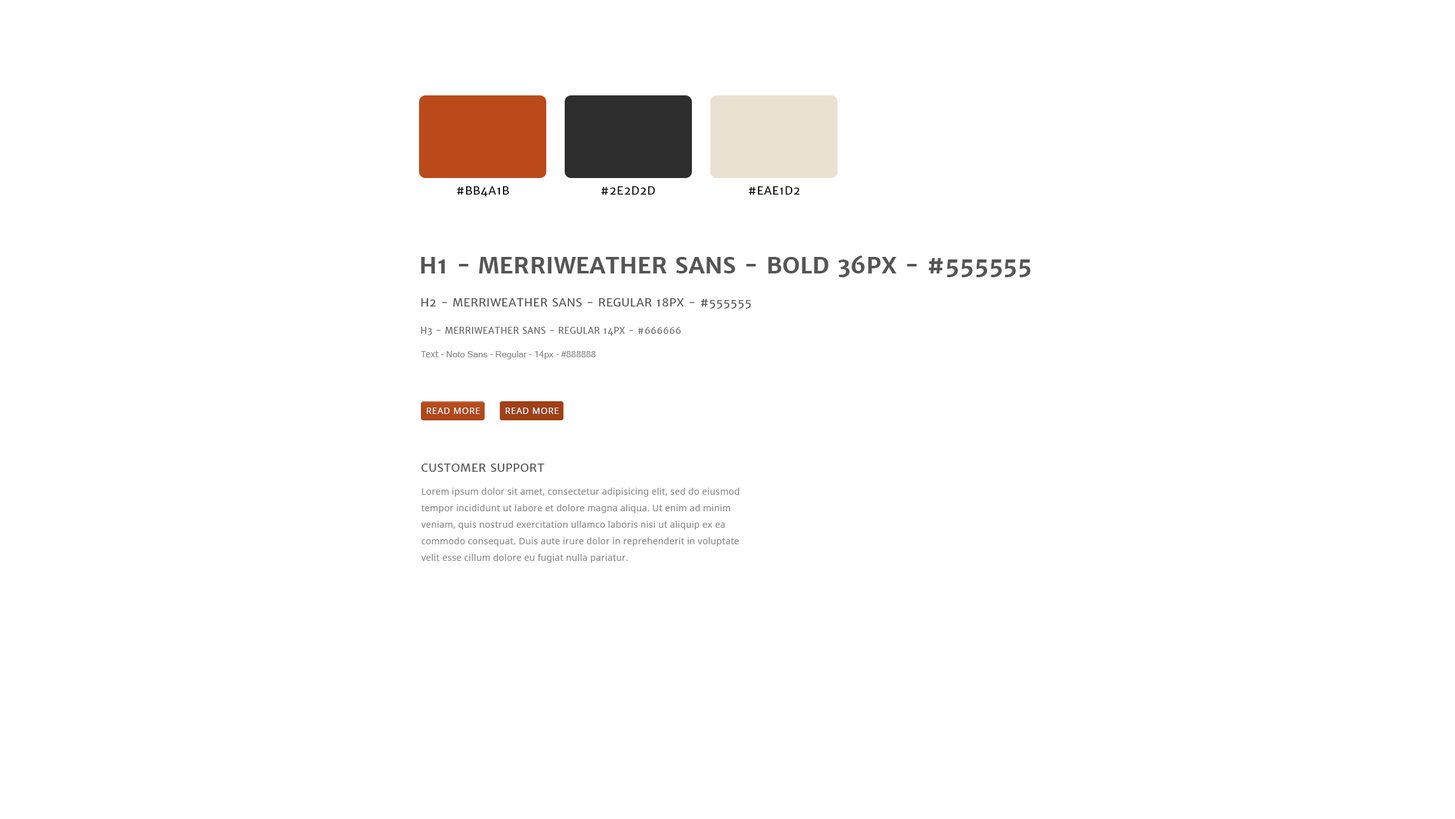
<style>
.page{position:relative;width:1455px;height:819px;background:#ffffff}
.page>*{position:absolute;margin:0}
.t1{font:11.4px "MerriweatherSans-Regular";letter-spacing:0.025em;color:#000000;text-transform:uppercase}
.t2{font:22.9px "MerriweatherSans-Bold";color:#555555;text-transform:uppercase}
.t3{font:11.4px "MerriweatherSans-Regular";letter-spacing:0.025em;color:#555555;text-transform:uppercase}
.t4{font:8.9px "MerriweatherSans-Regular";letter-spacing:0.025em;color:#666666;text-transform:uppercase}
.t5{font:8.9px "MicrosoftSansSerif";color:#888888}
.t6{font:8.9px "NotoSans";color:#888888}
.t7{font:8.9px "NotoSans";letter-spacing:0.05em;color:#fdfefe}
.t8{font:8.9px/16.5px "NotoSans";letter-spacing:0.025em;color:#888888}
</style>
<div class="page">
<p class="t1" style="left:457px;top:186px;width:53px;height:11px">#bb4a1b</p>
<p class="t1" style="left:601px;top:186px;width:54px;height:9px">#2e2d2d</p>
<p class="t1" style="left:749px;top:186px;width:51px;height:9px">#eae1d2</p>
<p class="t2" style="left:421px;top:255px;width:610px;height:22px">H1 - Merriweather Sans - Bold 36px - #555555</p>
<p class="t3" style="left:421px;top:298px;width:330px;height:11px">H2 - Merriweather Sans - Regular 18px - #555555</p>
<p class="t4" style="left:421px;top:327px;width:260px;height:9px">H3 - Merriweather Sans - Regular 14px - #666666</p>
<p class="t5" style="left:421px;top:351px;width:175px;height:8px"><span class="t6">Text - </span>Noto Sans - Regular - 14px - #888888</p>
<p class="t7" style="left:427px;top:408px;width:53px;height:6px">READ MORE</p>
<p class="t7" style="left:506px;top:408px;width:53px;height:6px">READ MORE</p>
<p class="t3" style="left:421px;top:464px;width:124px;height:8px">Customer support</p>
<p class="t8" style="left:421px;top:488px;width:319px;height:75px">Lorem ipsum dolor sit amet, consectetur adipisicing elit, sed do eiusmod tempor incididunt ut labore et dolore magna aliqua. Ut enim ad minim veniam, quis nostrud exercitation ullamco laboris nisi ut aliquip ex ea commodo consequat. Duis aute irure dolor in reprehenderit in voluptate velit esse cillum dolore eu fugiat nulla pariatur.</p>
</div>
